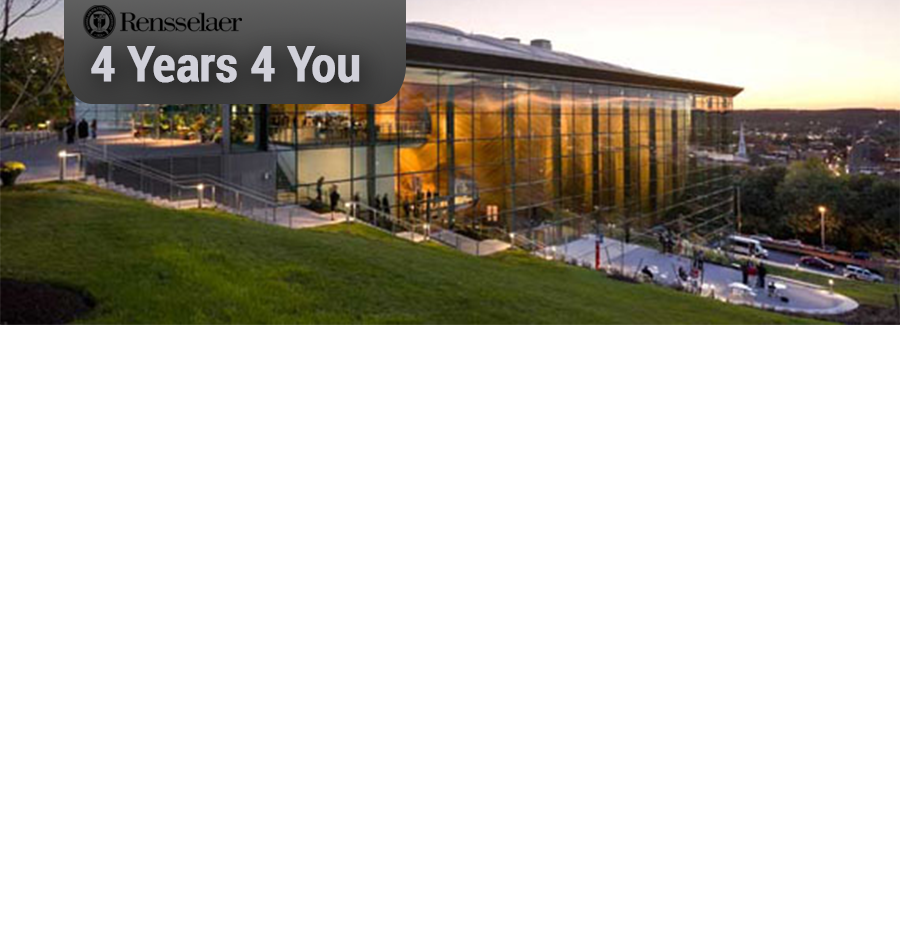
<style>
.page{position:relative;width:900px;height:950px;background:#ffffff}
.page>*{position:absolute;margin:0}
.t1{font:11.7px "Roboto-Bold";letter-spacing:-0.005em;color:#d1d1da;font-weight:bold;scale:0.87 1}
</style>
<div class="page">
<p class="t1" style="left:91px;top:46px;width:269px;height:37px">4 Years 4 You</p>
</div>
